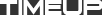
<style>
.page{position:relative;width:102px;height:15px;background:#ffffff}
.page>*{position:absolute;margin:0}
.t1{font:30px "Bitsumishi";color:#ffffff}
</style>
<div class="page">
<p class="t1" style="left:0px;top:0px;width:103px;height:15px">timeup</p>
</div>
